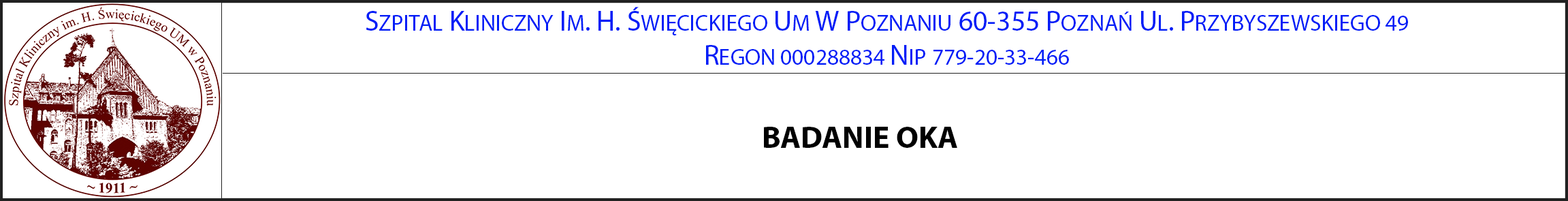
<style>
.page{position:relative;width:1568px;height:201px;background:#ffffff}
.page>*{position:absolute;margin:0}
.t1{font:22.7px "MyriadPro-Regular";color:#001df7}
.t2{font:28.4px "MyriadPro-Regular";color:#001df7}
.t3{font:31.2px "MyriadPro-Bold";color:#000000}
</style>
<div class="page">
<p class="t1" style="left:366px;top:7px;width:1042px;height:58px;text-align:center"><span class="t2">S</span>ZPITAL<span class="t2"> K</span>LINICZNY<span class="t2"> I</span>M<span class="t2">. H. Ś</span>WIĘCICKIEGO<span class="t2"> U</span>M<span class="t2"> W P</span>OZNANIU<span class="t2"> 60-355 P</span>OZNAŃ<span class="t2"> U</span>L<span class="t2">. P</span>RZYBYSZEWSKIEGO 49<br><span class="t2">R</span>EGON 000288834 <span class="t2">N</span>IP 779-20-33-466</p>
<p class="t3" style="left:764px;top:127px;width:193px;height:21px">BADANIE OKA</p>
</div>
